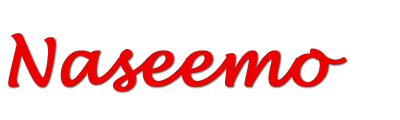
<style>
.page{position:relative;width:400px;height:120px;background:#ffffff}
.page>*{position:absolute;margin:0}
.t1{font:64px "LucidaHandwriting-Italic";color:#ee0000;font-weight:bold}
</style>
<div class="page">
<p class="t1" style="left:8px;top:33px;width:339px;height:59px">Naseemo</p>
</div>
